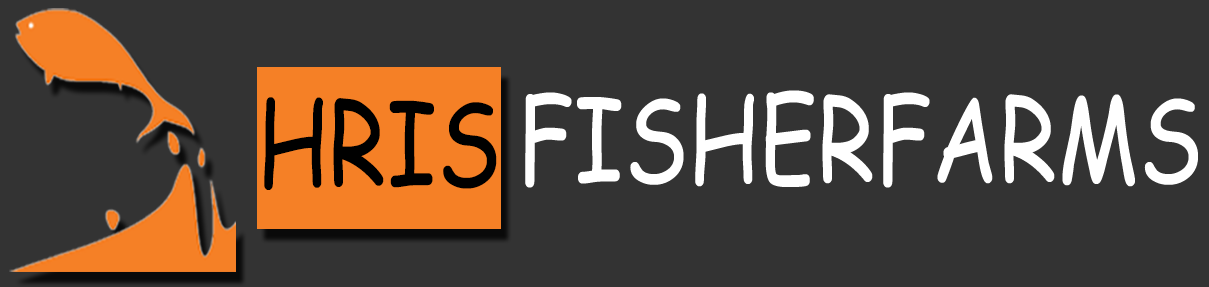
<style>
.page{position:relative;width:1209px;height:287px;background:#333333}
.page>*{position:absolute;margin:0}
.t1{font:116px "ComicSansMS";letter-spacing:0.005em;color:#000000;scale:0.79 1}
.t2{font:116px "ComicSansMS";letter-spacing:0.005em;color:#ffffff;scale:0.79 1}
</style>
<div class="page">
<p class="t1" style="left:264px;top:97px;width:233px;height:93px">HRIS</p>
<p class="t2" style="left:525px;top:90px;width:673px;height:98px">FISHERFARMS</p>
</div>
